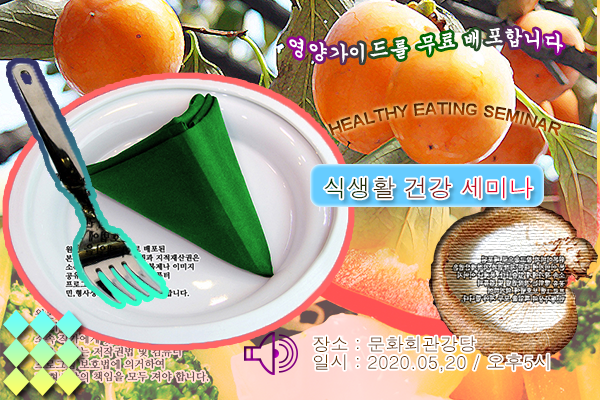
<style>
.page{position:relative;width:600px;height:400px}
.page>*{position:absolute;margin:0}
.t1{font:20px/18px "Gungsuh";letter-spacing:0.01em;color:#ffffff}
.t2{font:16px/18px "Arial-BoldMT";letter-spacing:0.01em}
.t3{font:24px "Dotum";letter-spacing:0.01em}
.t4{font:18px/18px "Dotum";letter-spacing:0.01em;color:#663300}
</style>
<div class="page">
<p class="t1" style="left:289px;top:27px;width:274px;height:36px;text-align:center">영양가이드를 무료 배포합니다</p>
<p class="t2" style="left:328px;top:102px;width:233px;height:35px;text-align:center">HEALTHY EATING SEMINAR</p>
<p class="t3" style="left:324px;top:177px;width:209px;height:22px">식생활 건강 세미나</p>
<p class="t4" style="left:313px;top:336px;width:236px;height:36px">장소 : 문화회관강당<br>일시 : 2020.05,20 / 오후5시</p>
</div>
